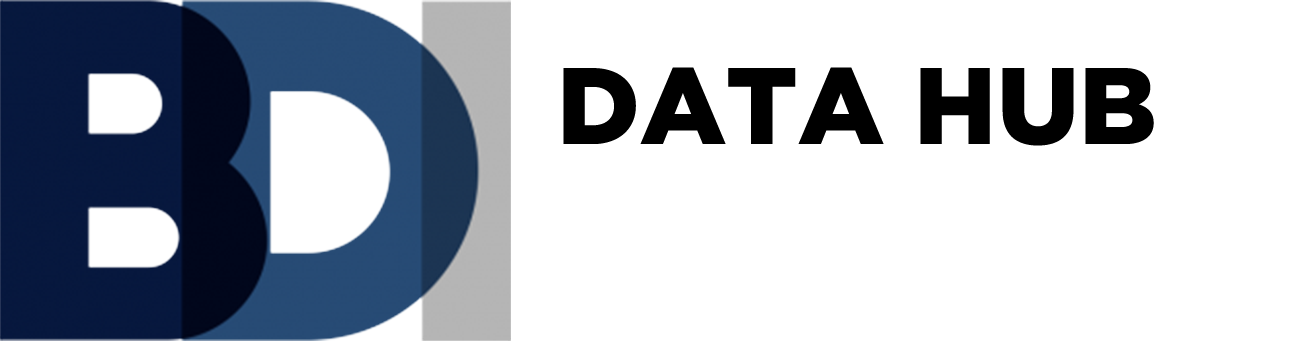
<style>
.page{position:relative;width:1295px;height:341px;background:#ffffff}
.page>*{position:absolute;margin:0}
.t1{font:108.3px "Gotham-Black";color:#000000}
</style>
<div class="page">
<p class="t1" style="left:563px;top:67px;width:591px;height:79px">DATA HUB</p>
</div>
